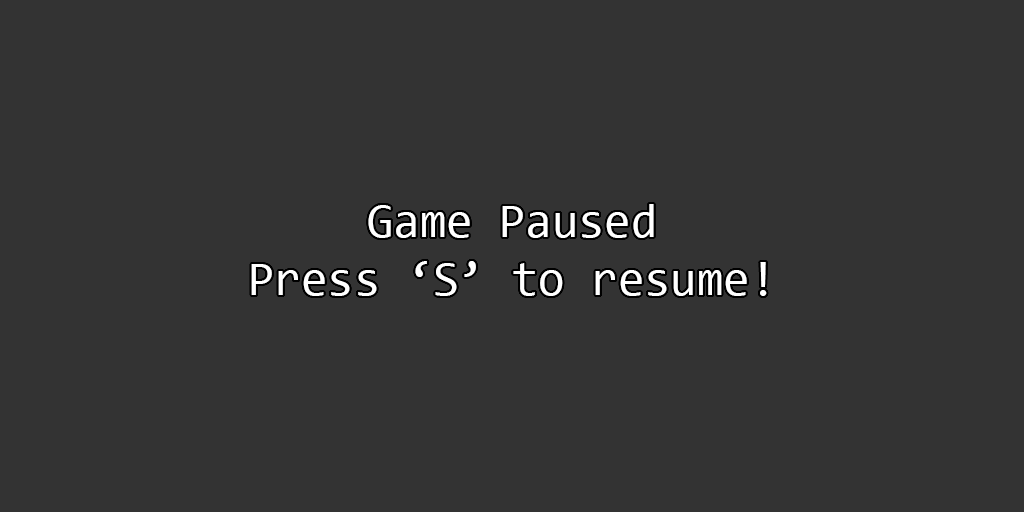
<style>
.page{position:relative;width:1024px;height:512px;background:#333333}
.page>*{position:absolute;margin:0}
.t1{font:48px "Consolas";color:#ffffff}
</style>
<div class="page">
<p class="t1" style="left:251px;top:204px;width:516px;height:92px;text-align:center">Game Paused<br>Press ‘S’ to resume!</p>
</div>
